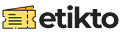
<style>
.page{position:relative;width:120px;height:32px;background:#ffffff}
.page>*{position:absolute;margin:0}
.t1{font:29px "Montserrat-Bold";letter-spacing:-0.06em;color:#222222}
</style>
<div class="page">
<p class="t1" style="left:39px;top:5px;width:80px;height:24px">etikto</p>
</div>
